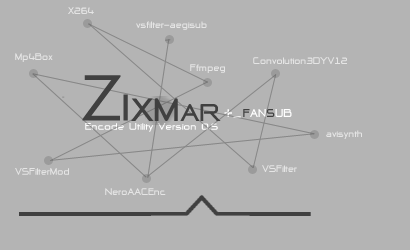
<style>
.page{position:relative;width:410px;height:250px;background:#b4b4b4}
.page>*{position:absolute;margin:0}
.t1{font:12px "-@-D-RCW2550v.2.00-";color:#e5e5e5}
.t2{font:92px "ThaiSansLite";color:#404040;scale:1.11 1}
.t3{font:46px "-@-D-RCW2550v.2.00-";color:#404040;scale:1.11 1}
.t4{font:40px "-@-D-RCW2550v.2.00-";color:#404040;scale:1.11 1}
.t5{font:30px "-@-D-RCW2550v.2.00-";color:#404040;scale:1.11 1}
.t6{font:18px "-@-D-RCW2550v.2.00-"}
.t7{font:12px "-@-D-RCW2550v.2.00-";color:#ffffff;scale:1.11 1}
</style>
<div class="page">
<p class="t1" style="left:68px;top:7px;width:26px;height:7px">X264</p>
<p class="t1" style="left:136px;top:21px;width:71px;height:9px">vsfilter-aegisub</p>
<p class="t1" style="left:15px;top:53px;width:38px;height:9px">Mp4Box</p>
<p class="t1" style="left:190px;top:64px;width:35px;height:9px">Ffmpeg</p>
<p class="t1" style="left:253px;top:57px;width:94px;height:7px">Convolution3DYV12</p>
<p class="t2" style="left:82px;top:75px;width:46px;height:46px">Z<span class="t3">I</span></p>
<p class="t4" style="left:131px;top:98px;width:90px;height:23px">XM<span class="t5">AR</span></p>
<p class="t6" style="left:224px;top:109px;width:17px;height:9px">+_</p>
<p class="t7" style="left:85px;top:123px;width:133px;height:9px">Encode Utility Version 0.5</p>
<p class="t1" style="left:326px;top:130px;width:36px;height:9px">avisynth</p>
<p class="t1" style="left:15px;top:168px;width:54px;height:7px">VSFilterMod</p>
<p class="t1" style="left:262px;top:165px;width:35px;height:7px">VSFilter</p>
<p class="t1" style="left:105px;top:188px;width:61px;height:7px">NeroAACEnc</p>
</div>
